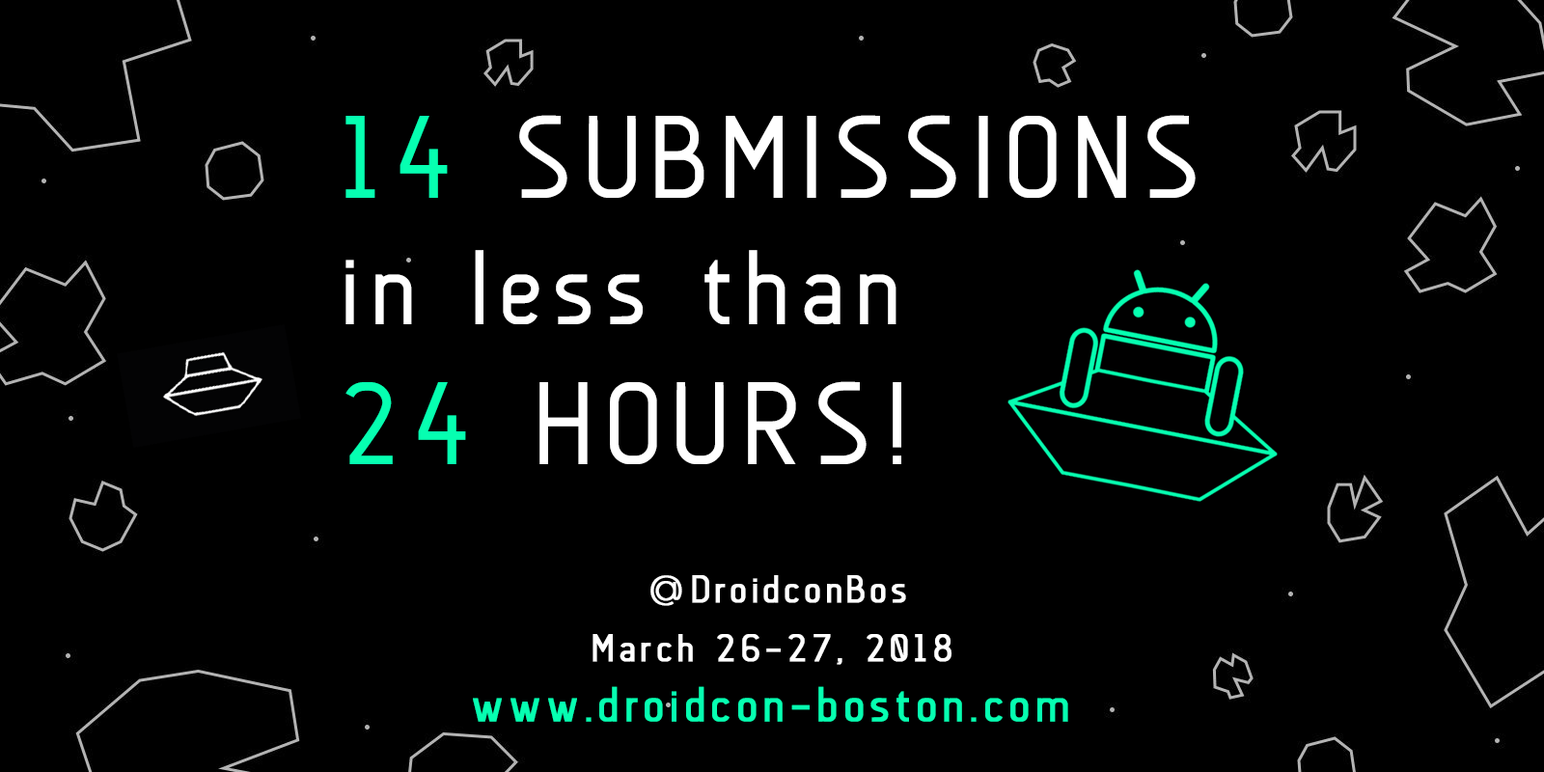
<style>
.page{position:relative;width:1544px;height:772px;background:#000000}
.page>*{position:absolute;margin:0}
.t1{font:105.1px "Anson-Regular";letter-spacing:0.1em;color:#ffffff}
.t2{font:116.7px "Anson-Regular";letter-spacing:0.1em;color:#06ffb1}
.t3{font:116.7px "Anson-Regular";letter-spacing:0.1em;color:#ffffff}
.t4{font:38.6px "Anson-Regular";letter-spacing:0.1em;color:#ffffff;font-weight:bold}
.t5{font:38.6px "NexaLight";letter-spacing:0.1em;color:#ffffff;font-weight:bold}
.t6{font:48.3px "Anson-Regular";letter-spacing:0.1em;color:#06ffb1;font-weight:bold}
</style>
<div class="page">
<p class="t1" style="left:346px;top:115px;width:850px;height:349px"><span class="t2">14 </span><span class="t3">SUBMISSIONS<br></span>in less than<br><span class="t2">24</span><span class="t3"> HOURS!</span></p>
<p class="t4" style="left:651px;top:575px;width:255px;height:31px"><span class="t5">@</span>DroidconBos</p>
<p class="t4" style="left:593px;top:634px;width:359px;height:31px">March 26-27, 2018</p>
<p class="t6" style="left:473px;top:686px;width:595px;height:36px">www.droidcon-boston.com</p>
</div>
